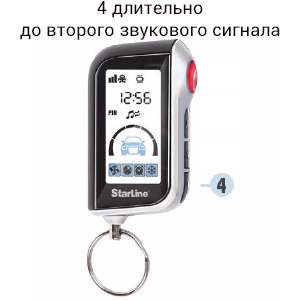
<style>
.page{position:relative;width:300px;height:300px;background:#fefefe}
.page>*{position:absolute;margin:0}
.t1{font:18px "Roboto-Regular";letter-spacing:0.009em;color:#110000}
</style>
<div class="page">
<p class="t1" style="left:20px;top:1px;width:260px;height:39px;text-align:center">4 длительно<br>до второго звукового сигнала</p>
</div>
